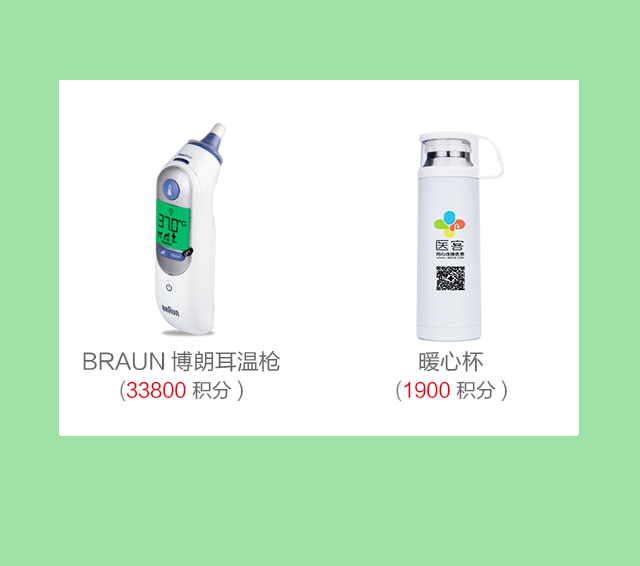
<style>
.page{position:relative;width:640px;height:566px;background:#a0e1a7}
.page>*{position:absolute;margin:0}
.t1{font:22px "FZLTHK--GBK1-0";color:#656565}
.t2{font:20px "FZLTHK--GBK1-0";color:#e60012}
.t3{font:20px "FZLTHK--GBK1-0";color:#7e7e7e}
.t4{font:20px "FZLTHK--GBK1-0";color:#656565}
</style>
<div class="page">
<p class="t1" style="left:83px;top:350px;width:197px;height:22px">BRAUN博朗耳温枪</p>
<p class="t1" style="left:419px;top:351px;width:65px;height:21px">暖心杯</p>
<p class="t2" style="left:120px;top:380px;width:123px;height:22px"><span class="t3">(</span>33800<span class="t4"> 积分)</span></p>
<p class="t2" style="left:396px;top:380px;width:111px;height:22px"><span class="t3">(</span>1900<span class="t4"> 积分)</span></p>
</div>
